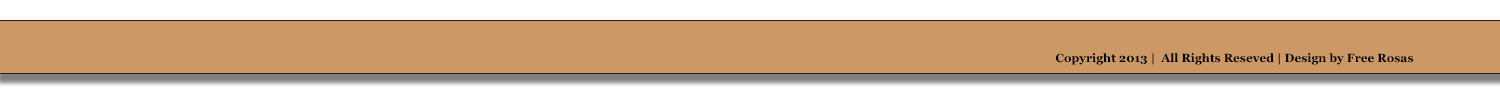
<style>
.page{position:relative;width:1500px;height:100px;background:#cc9966}
.page>*{position:absolute;margin:0}
.t1{font:11.7px "Georgia-Bold";color:#000000}
</style>
<div class="page">
<p class="t1" style="left:1056px;top:53px;width:358px;height:12px">Copyright 2013 |  All Rights Reseved | Design by Free Rosas</p>
</div>
